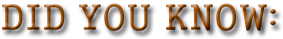
<style>
.page{position:relative;width:283px;height:39px;background:#ffffff}
.page>*{position:absolute;margin:0}
.t1{font:36px "Gungsuh"}
</style>
<div class="page">
<p class="t1" style="left:2px;top:3px;width:274px;height:28px">DID YOU KNOW:</p>
</div>
